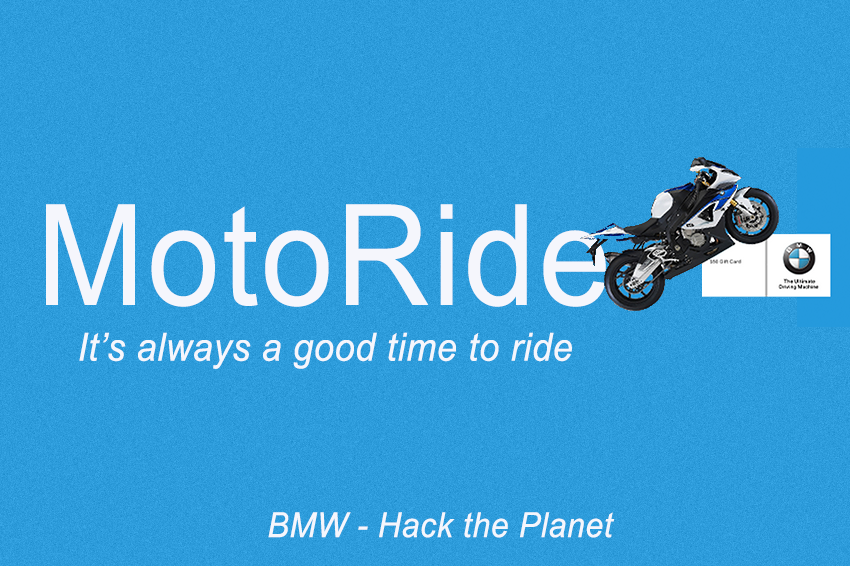
<style>
.page{position:relative;width:850px;height:566px}
.page>*{position:absolute;margin:0}
.t1{font:140.4px "ArialMT";letter-spacing:0.02em;color:#f5f6fc;scale:0.93 1}
.t2{font:38.9px "Arial-ItalicMT";letter-spacing:0.02em;color:#f5f6fc;scale:0.93 1}
.t3{font:34.6px "Arial-ItalicMT";letter-spacing:0.02em;color:#f5f6fc;scale:0.93 1}
</style>
<div class="page">
<p class="t1" style="left:46px;top:204px;width:560px;height:103px">MotoRide</p>
<p class="t2" style="left:79px;top:332px;width:493px;height:37px">It’s always a good time to ride</p>
<p class="t3" style="left:268px;top:512px;width:347px;height:26px">BMW - Hack the Planet</p>
</div>
